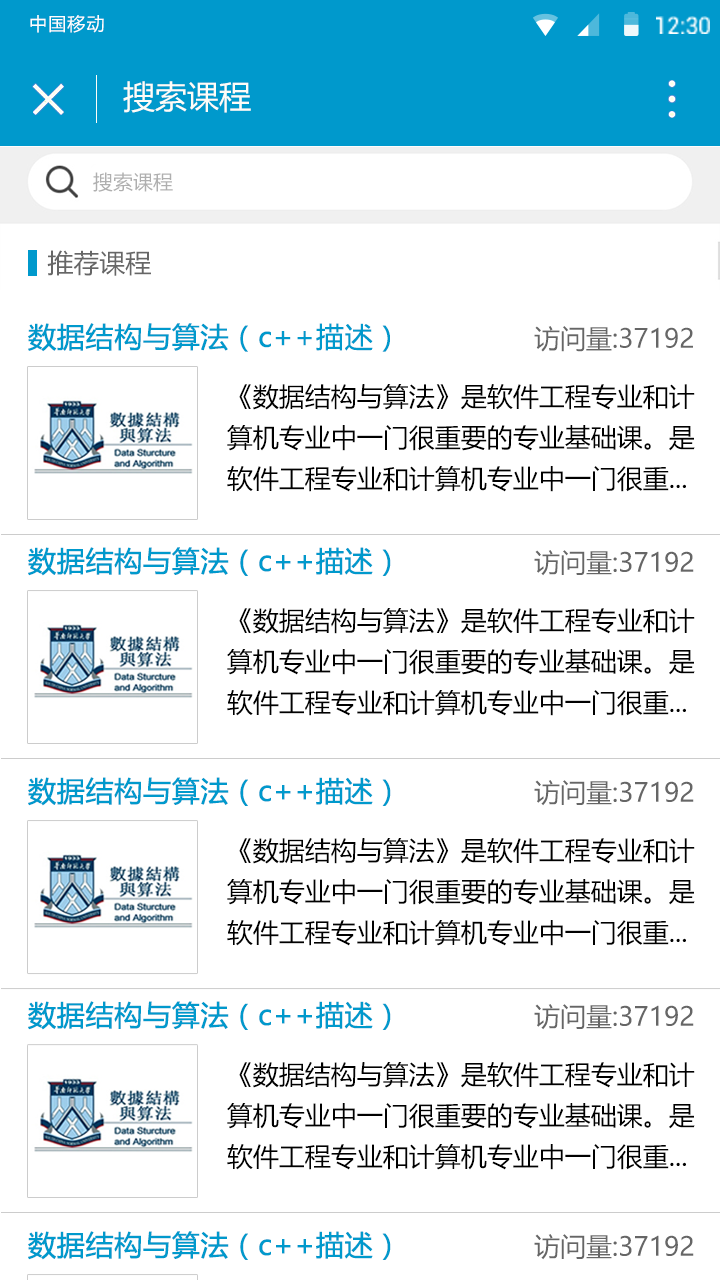
<style>
.page{position:relative;width:720px;height:1280px;background:#ffffff}
.page>*{position:absolute;margin:0}
.t1{font:17.9px "MicrosoftYaHei";letter-spacing:0.065em;color:#ffffff}
.t2{font:32px "MicrosoftYaHei";color:#fefdf8}
.t3{font:19.8px "MicrosoftYaHei";color:#afafaf}
.t4{font:26px "MicrosoftYaHei";color:#666666}
.t5{font:28px "MicrosoftYaHei";color:#0099cc;font-weight:bold}
.t6{font:26px/41px "MicrosoftYaHei";color:#000000}
</style>
<div class="page">
<p class="t1" style="left:30px;top:15px;width:74px;height:18px">中国移动</p>
<p class="t2" style="left:123px;top:81px;width:128px;height:32px">搜索课程</p>
<p class="t3" style="left:93px;top:172px;width:80px;height:20px">搜索课程</p>
<p class="t4" style="left:47px;top:250px;width:104px;height:26px">推荐课程</p>
<p class="t5" style="left:28px;top:323px;width:362px;height:29px">数据结构与算法（c++描述）</p>
<p class="t4" style="left:534px;top:326px;width:159px;height:26px">访问量:37192</p>
<p class="t6" style="left:227px;top:384px;width:468px;height:108px">《数据结构与算法》是软件工程专业和计算机专业中一门很重要的专业基础课。是软件工程专业和计算机专业中一门很重...</p>
<p class="t5" style="left:28px;top:547px;width:363px;height:29px">数据结构与算法（c++描述）</p>
<p class="t4" style="left:534px;top:550px;width:160px;height:26px">访问量:37192</p>
<p class="t6" style="left:227px;top:608px;width:468px;height:108px">《数据结构与算法》是软件工程专业和计算机专业中一门很重要的专业基础课。是软件工程专业和计算机专业中一门很重...</p>
<p class="t5" style="left:28px;top:777px;width:363px;height:29px">数据结构与算法（c++描述）</p>
<p class="t4" style="left:534px;top:780px;width:160px;height:26px">访问量:37192</p>
<p class="t6" style="left:227px;top:838px;width:468px;height:108px">《数据结构与算法》是软件工程专业和计算机专业中一门很重要的专业基础课。是软件工程专业和计算机专业中一门很重...</p>
<p class="t5" style="left:28px;top:1001px;width:363px;height:29px">数据结构与算法（c++描述）</p>
<p class="t4" style="left:534px;top:1004px;width:160px;height:26px">访问量:37192</p>
<p class="t6" style="left:227px;top:1062px;width:468px;height:108px">《数据结构与算法》是软件工程专业和计算机专业中一门很重要的专业基础课。是软件工程专业和计算机专业中一门很重...</p>
<p class="t5" style="left:28px;top:1231px;width:363px;height:29px">数据结构与算法（c++描述）</p>
<p class="t4" style="left:534px;top:1234px;width:160px;height:26px">访问量:37192</p>
</div>
